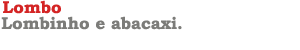
<style>
.page{position:relative;width:300px;height:50px;background:#ffffff}
.page>*{position:absolute;margin:0}
.t1{font:17px "BookmanOldStyle-Bold";color:#d42525}
.t2{font:17px "BookmanOldStyle-Bold";color:#7c7c79}
</style>
<div class="page">
<p class="t1" style="left:3px;top:0px;width:58px;height:14px">Lombo</p>
<p class="t2" style="left:1px;top:16px;width:181px;height:14px">Lombinho e abacaxi.</p>
</div>
